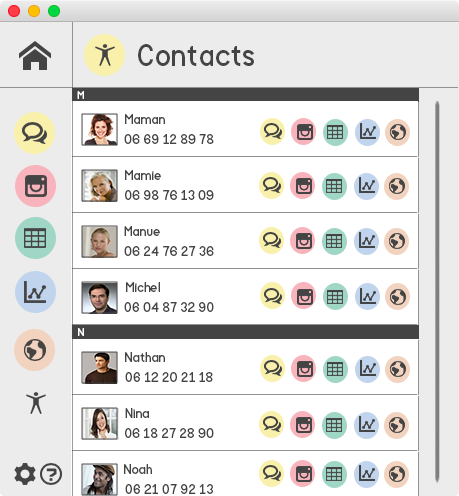
<style>
.page{position:relative;width:459px;height:496px;background:#ffffff}
.page>*{position:absolute;margin:0}
.t1{font:30px "Mockup-Regular";color:#444444}
.t2{font:10px "Mockup-Regular";color:#ffffff}
.t3{font:13px "Mockup-Regular";color:#444444}
</style>
<div class="page">
<p class="t1" style="left:138px;top:44px;width:117px;height:22px">Contacts</p>
<p class="t2" style="left:77px;top:91px;width:7px;height:8px">M</p>
<p class="t3" style="left:125px;top:114px;width:40px;height:10px">Maman</p>
<p class="t3" style="left:124px;top:134px;width:90px;height:10px">06 69 12 89 78</p>
<p class="t3" style="left:125px;top:170px;width:36px;height:10px">Mamie</p>
<p class="t3" style="left:125px;top:190px;width:89px;height:10px">06 98 76 13 09</p>
<p class="t3" style="left:124px;top:226px;width:36px;height:10px">Manue</p>
<p class="t3" style="left:124px;top:246px;width:90px;height:10px">06 24 76 27 36</p>
<p class="t3" style="left:126px;top:282px;width:34px;height:10px">Michel</p>
<p class="t3" style="left:124px;top:302px;width:90px;height:10px">06 04 87 32 90</p>
<p class="t2" style="left:78px;top:328px;width:6px;height:8px">N</p>
<p class="t3" style="left:125px;top:352px;width:40px;height:10px">Nathan</p>
<p class="t3" style="left:125px;top:372px;width:88px;height:10px">06 12 20 21 18</p>
<p class="t3" style="left:125px;top:408px;width:24px;height:10px">Nina</p>
<p class="t3" style="left:125px;top:428px;width:89px;height:10px">06 18 27 28 90</p>
<p class="t3" style="left:124px;top:464px;width:28px;height:10px">Noah</p>
<p class="t3" style="left:125px;top:484px;width:88px;height:10px">06 21 07 92 13</p>
</div>
